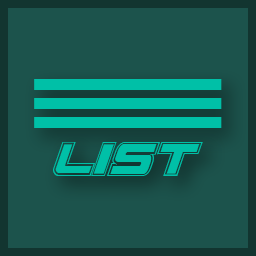
<style>
.page{position:relative;width:256px;height:256px;background:#1c534c}
.page>*{position:absolute;margin:0}
.t1{font:70px/19px "Arial-Black";color:#00c0a7;scale:9.24 1}
.t2{font:67.6px "SpaceRangerAcademyItalic";color:#00c0a7}
</style>
<div class="page">
<p class="t1" style="left:34px;top:79px;width:188px;height:49px">-<br>-<br>-</p>
<p class="t2" style="left:53px;top:142px;width:150px;height:34px">liST</p>
</div>
